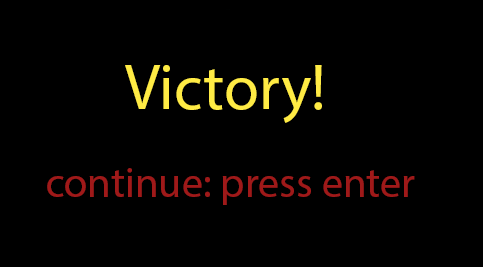
<style>
.page{position:relative;width:483px;height:267px;background:#000000}
.page>*{position:absolute;margin:0}
.t1{font:63.5px "MyriadPro-Regular";color:#ffeb44}
.t2{font:42.3px "MyriadPro-Regular";color:#9f1919}
</style>
<div class="page">
<p class="t1" style="left:125px;top:65px;width:197px;height:58px">Victory!</p>
<p class="t2" style="left:47px;top:168px;width:368px;height:37px">continue: press enter</p>
</div>
